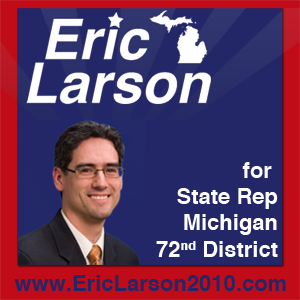
<style>
.page{position:relative;width:300px;height:300px;background:#232767}
.page>*{position:absolute;margin:0}
.t1{font:22px "Helvetica-Bold";color:#ffffff}
.t2{font:22px "Helvetica-Bold";color:#232767}
</style>
<div class="page">
<p class="t1" style="left:156px;top:162px;width:122px;height:95px;text-align:right">for <br>State Rep<br>Michigan<br>72nd District</p>
<p class="t2" style="left:14px;top:275px;width:272px;height:16px">www.EricLarson2010.com</p>
</div>
